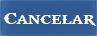
<style>
.page{position:relative;width:97px;height:36px;background:#2f5a90}
.page>*{position:absolute;margin:0}
.t1{font:18px "GodOfWar";color:#ffffff}
</style>
<div class="page">
<p class="t1" style="left:3px;top:13px;width:94px;height:13px">Cancelar</p>
</div>
